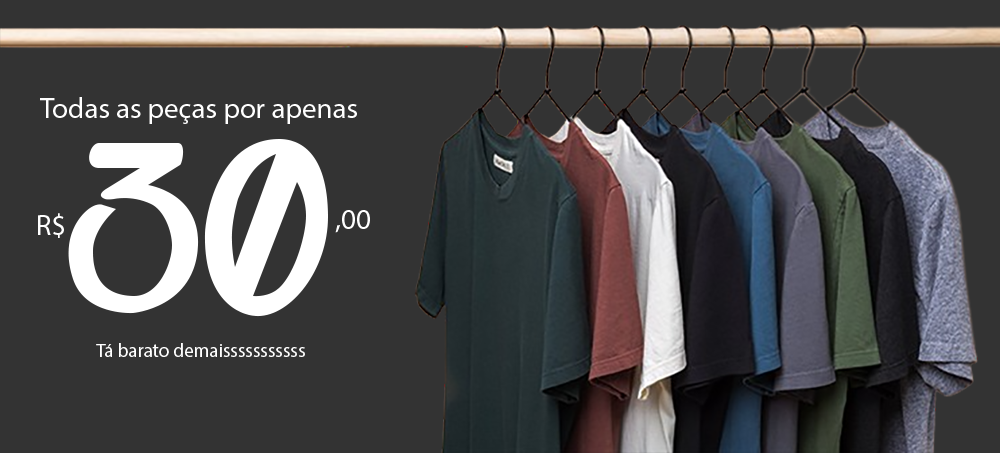
<style>
.page{position:relative;width:1000px;height:453px;background:#333333}
.page>*{position:absolute;margin:0}
.t1{font:29px "MyriadPro-Regular";color:#ffffff}
.t2{font:19px "MyriadPro-Regular";color:#ffffff}
</style>
<div class="page">
<p class="t1" style="left:40px;top:97px;width:317px;height:27px">Todas as peças por apenas</p>
<p class="t1" style="left:38px;top:213px;width:26px;height:25px">R$</p>
<p class="t1" style="left:335px;top:210px;width:35px;height:23px">,00</p>
<p class="t2" style="left:96px;top:343px;width:209px;height:14px">Tá barato demaisssssssssss</p>
</div>
